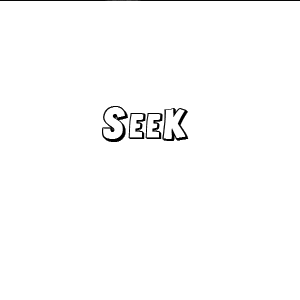
<style>
.page{position:relative;width:300px;height:300px;background:#ffffff}
.page>*{position:absolute;margin:0}
.t1{font:24px "AgentOrange"}
.t2{font:32px "AgentOrange"}
.t3{font:30px "AgentOrange"}
</style>
<div class="page">
<p class="t1" style="left:102px;top:105px;width:87px;height:36px"><span class="t2">S</span>EE<span class="t3">K</span></p>
</div>
